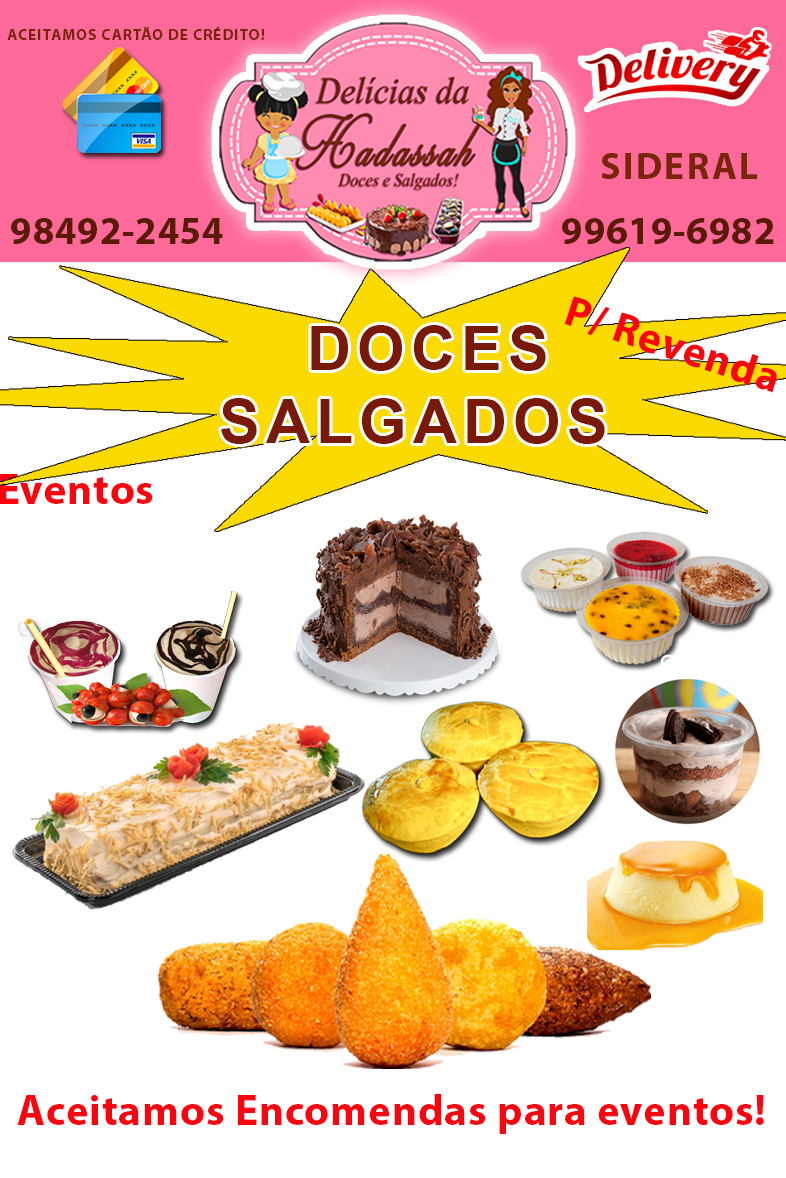
<style>
.page{position:relative;width:786px;height:1178px;background:#ffffff}
.page>*{position:absolute;margin:0}
.t1{font:15.5px "MyriadPro-Bold";letter-spacing:0.06em;color:#792509}
.t2{font:37.7px "MyriadPro-Bold";letter-spacing:0.06em;color:#792509}
.t3{font:38.9px "MyriadPro-Bold";letter-spacing:0.02em;color:#5a1b06}
.t4{font:43.3px "MyriadPro-Bold";letter-spacing:0.02em;color:#fb030f}
.t5{font:61.1px/73.1px "Arial-BoldMT";letter-spacing:0.1em;color:#791909}
.t6{font:58.3px/56.5px "Arial-BoldMT";letter-spacing:0.1em;color:#791909}
.t7{font:43.1px "MyriadPro-Bold";letter-spacing:0.02em;color:#fb030f}
</style>
<div class="page">
<p class="t1" style="left:7px;top:27px;width:258px;height:13px">ACEITAMOS CARTÃO DE CRÉDITO!</p>
<p class="t2" style="left:601px;top:153px;width:156px;height:26px">SIDERAL</p>
<p class="t3" style="left:11px;top:218px;width:763px;height:26px">98492-2454                                       99619-6982</p>
<p class="t4" style="left:564px;top:296px;width:213px;height:97px;rotate:18deg">P/ Revenda</p>
<p class="t5" style="left:221px;top:325px;width:384px;height:119px"><span class="t6">    </span>DOCES<br>SALGADOS</p>
<p class="t7" style="left:17px;top:1094px;width:747px;height:40px">Aceitamos Encomendas para eventos!</p>
</div>
